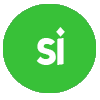
<style>
.page{position:relative;width:100px;height:100px;background:#38c138}
.page>*{position:absolute;margin:0}
.t1{font:48px "ELEGANCE";color:#ffffff}
</style>
<div class="page">
<p class="t1" style="left:36px;top:27px;width:29px;height:38px">si</p>
</div>
